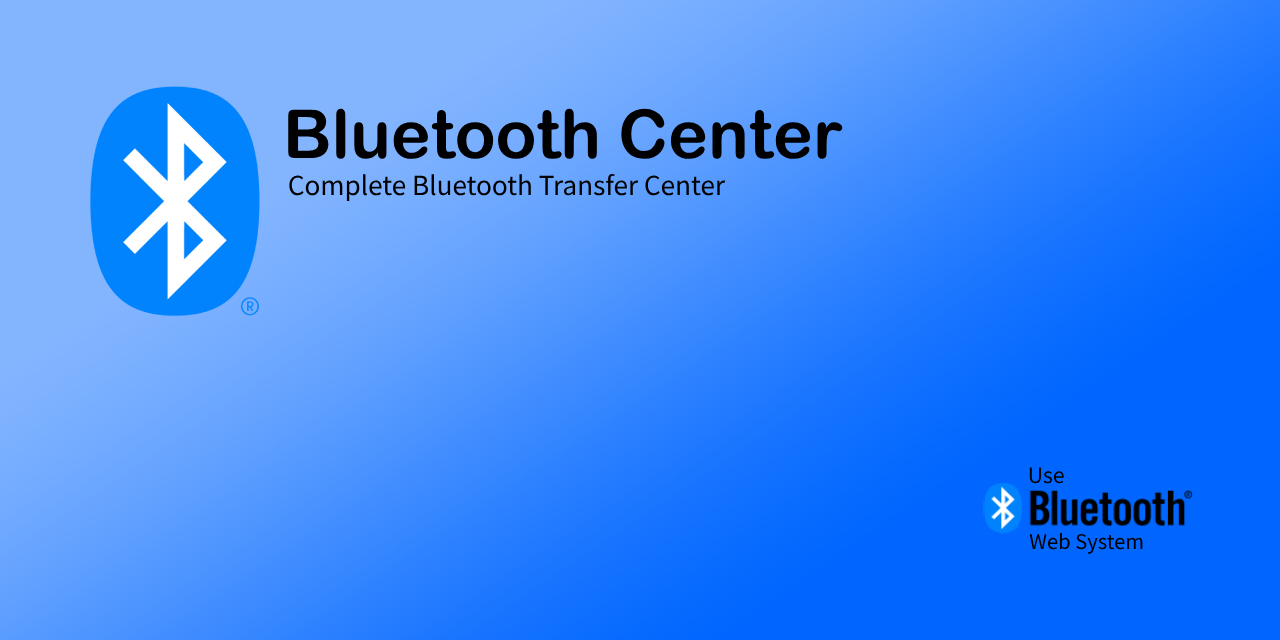
<style>
.page{position:relative;width:1280px;height:640px}
.page>*{position:absolute;margin:0}
.t1{font:67.5px "ArialRoundedMTBold";color:#000000}
.t2{font:26.1px "SourceHanSans-Regular";color:#000000}
.t3{font:21.2px "SourceHanSansTC-Regular";color:#000000}
.t4{font:20.2px "SourceHanSansTC-Regular";color:#000000}
</style>
<div class="page">
<p class="t1" style="left:288px;top:108px;width:555px;height:51px">Bluetooth Center</p>
<p class="t2" style="left:289px;top:174px;width:437px;height:27px">Complete Bluetooth Transfer Center</p>
<p class="t3" style="left:1029px;top:467px;width:35px;height:17px">Use</p>
<p class="t4" style="left:1029px;top:533px;width:114px;height:21px">Web System</p>
</div>
